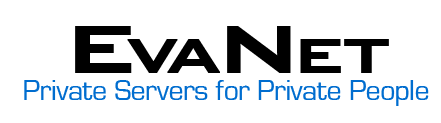
<style>
.page{position:relative;width:441px;height:123px;background:#ffffff}
.page>*{position:absolute;margin:0}
.t1{font:64.8px "BankGothicBT-Medium";letter-spacing:-0.1em;color:#000000;font-weight:bold;scale:1.11 1}
.t2{font:90px "BankGothicBT-Medium";letter-spacing:-0.1em;color:#000000;font-weight:bold;scale:1.11 1}
.t3{font:30px "Eurostile-Roman-DTC";letter-spacing:-0.02em;color:#006dcf}
</style>
<div class="page">
<p class="t1" style="left:75px;top:26px;width:314px;height:47px"><span class="t2">E</span>VA<span class="t2">N</span>ET</p>
<p class="t3" style="left:24px;top:80px;width:405px;height:26px">Private Servers for Private People</p>
</div>
